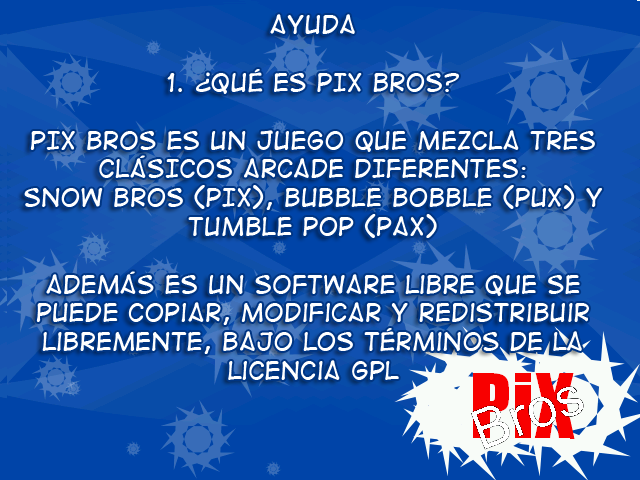
<style>
.page{position:relative;width:640px;height:480px}
.page>*{position:absolute;margin:0}
.t1{font:24px "DigitalStrip2";color:#ffffff}
</style>
<div class="page">
<p class="t1" style="left:24px;top:14px;width:578px;height:366px;text-align:center">AYUDA<br><br>1. ¿qUÉ ES PIX BROS?<br><br>pIx bROS ES UN JUEGO QUE MEZCLA TRES CLÁSICOS ARCADE DIFERENTES: <br>SNOW BROS (pIx), BUBBLE BOBBLE (pux) Y TUMBLE POP (pax)<br><br>además es un software libre que se puede copiar, modificar y redistribuir libremente, bajo los términos de la <br>licencia gpl</p>
</div>
